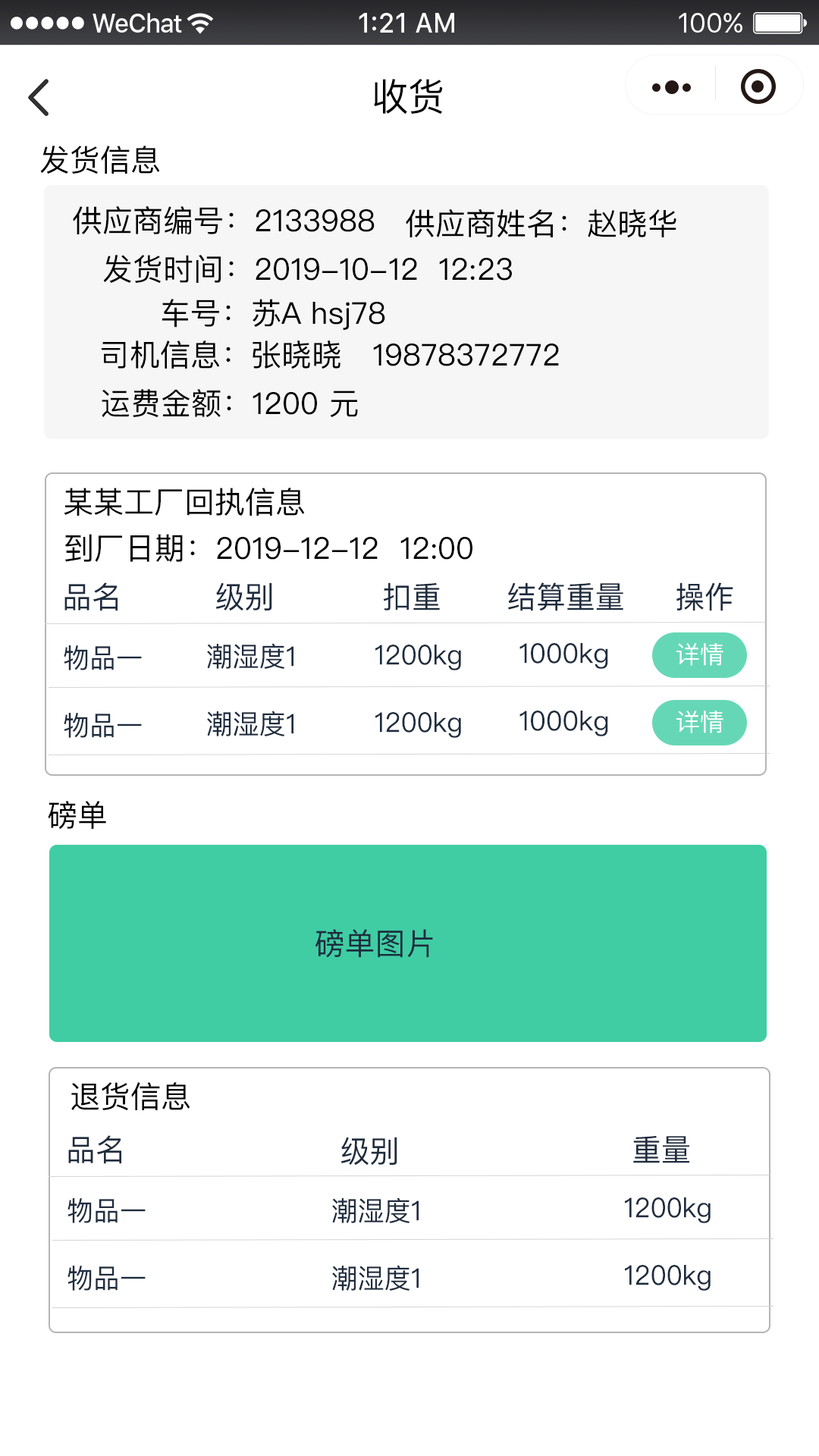
<style>
.page{position:relative;width:819px;height:1456px;background:#ffffff}
.page>*{position:absolute;margin:0}
.t1{font:37.9px "PingFangSC-Regular";color:#000000}
.t2{font:30.3px "PingFangSC-Regular";color:#000000}
.t3{font:30.3px "PingFangSC-Regular";color:#1e2c3e}
.t4{font:27.3px "PingFangSC-Regular";color:#1e2c3e}
.t5{font:24.3px "PingFangSC-Regular";color:#ffffff}
</style>
<div class="page">
<p class="t1" style="left:374px;top:79px;width:69px;height:36px">收货</p>
<p class="t2" style="left:40px;top:146px;width:120px;height:28px">发货信息</p>
<p class="t2" style="left:73px;top:206px;width:302px;height:28px">供应商编号：2133988</p>
<p class="t2" style="left:406px;top:209px;width:270px;height:29px">供应商姓名：赵晓华</p>
<p class="t2" style="left:103px;top:255px;width:409px;height:29px">发货时间：2019-10-12  12:23</p>
<p class="t2" style="left:162px;top:299px;width:223px;height:31px">车号：苏A hsj78</p>
<p class="t2" style="left:102px;top:340px;width:457px;height:29px">司机信息：张晓晓  19878372772</p>
<p class="t2" style="left:102px;top:389px;width:256px;height:29px">运费金额：1200 元</p>
<p class="t2" style="left:64px;top:488px;width:241px;height:28px">某某工厂回执信息</p>
<p class="t2" style="left:65px;top:534px;width:407px;height:28px">到厂日期：2019-12-12  12:00</p>
<p class="t3" style="left:64px;top:582px;width:54px;height:29px">品名</p>
<p class="t3" style="left:216px;top:582px;width:56px;height:29px">级别</p>
<p class="t3" style="left:383px;top:582px;width:57px;height:28px">扣重</p>
<p class="t3" style="left:508px;top:582px;width:115px;height:29px">结算重量</p>
<p class="t3" style="left:676px;top:582px;width:57px;height:29px">操作</p>
<p class="t4" style="left:64px;top:645px;width:78px;height:25px">物品一</p>
<p class="t4" style="left:207px;top:643px;width:86px;height:26px">潮湿度1</p>
<p class="t4" style="left:375px;top:645px;width:86px;height:25px">1200kg</p>
<p class="t4" style="left:519px;top:643px;width:89px;height:26px">1000kg</p>
<p class="t5" style="left:676px;top:643px;width:47px;height:23px">详情</p>
<p class="t4" style="left:64px;top:712px;width:78px;height:26px">物品一</p>
<p class="t4" style="left:207px;top:711px;width:86px;height:25px">潮湿度1</p>
<p class="t4" style="left:375px;top:712px;width:86px;height:26px">1200kg</p>
<p class="t4" style="left:519px;top:711px;width:89px;height:25px">1000kg</p>
<p class="t5" style="left:676px;top:711px;width:47px;height:22px">详情</p>
<p class="t2" style="left:48px;top:801px;width:58px;height:29px">磅单</p>
<p class="t3" style="left:315px;top:929px;width:118px;height:29px">磅单图片</p>
<p class="t2" style="left:71px;top:1082px;width:119px;height:29px">退货信息</p>
<p class="t3" style="left:68px;top:1135px;width:53px;height:29px">品名</p>
<p class="t3" style="left:341px;top:1137px;width:56px;height:29px">级别</p>
<p class="t3" style="left:633px;top:1135px;width:56px;height:28px">重量</p>
<p class="t4" style="left:67px;top:1197px;width:79px;height:26px">物品一</p>
<p class="t4" style="left:332px;top:1197px;width:87px;height:26px">潮湿度1</p>
<p class="t4" style="left:625px;top:1197px;width:86px;height:26px">1200kg</p>
<p class="t4" style="left:67px;top:1265px;width:79px;height:26px">物品一</p>
<p class="t4" style="left:332px;top:1265px;width:87px;height:26px">潮湿度1</p>
<p class="t4" style="left:625px;top:1265px;width:86px;height:26px">1200kg</p>
</div>
